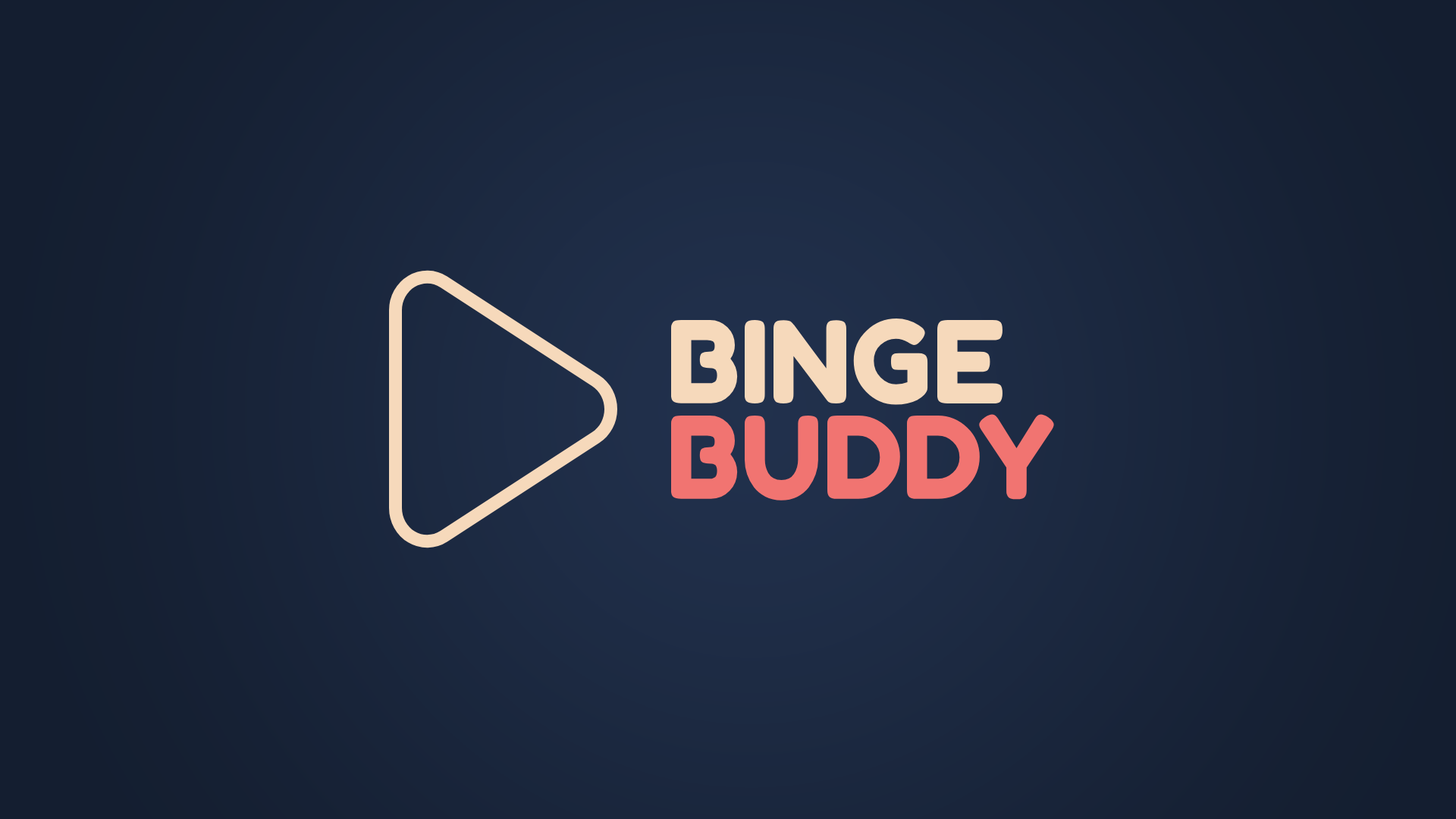
<style>
.page{position:relative;width:1456px;height:819px}
.page>*{position:absolute;margin:0}
.t1{font:113.7px "FredokaOne-Regular";color:#f6d9bb}
.t2{font:113.7px "FredokaOne-Regular";color:#f17471}
</style>
<div class="page">
<p class="t1" style="left:671px;top:318px;width:332px;height:87px">BINGE</p>
<p class="t2" style="left:671px;top:414px;width:383px;height:86px">BUDDY</p>
</div>
